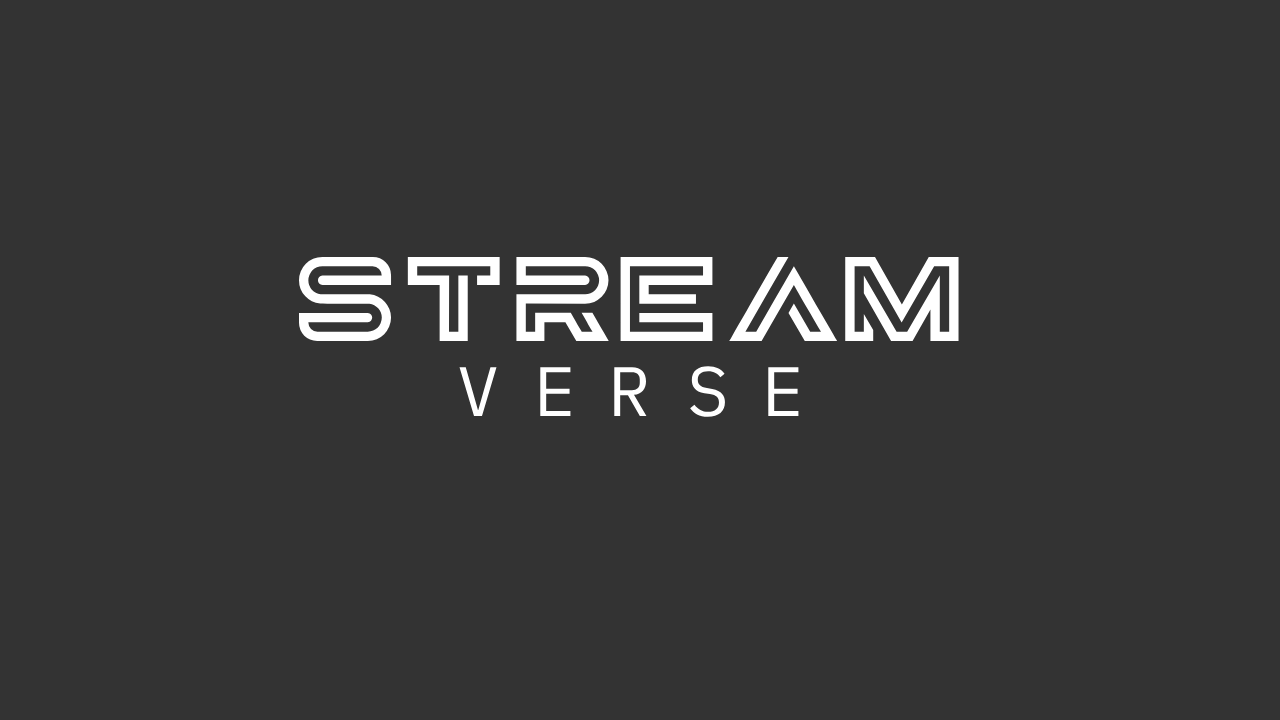
<style>
.page{position:relative;width:1280px;height:720px;background:#333333}
.page>*{position:absolute;margin:0}
.t1{font:120px "Garde";color:#ffffff}
.t2{font:70px "iAWriterDuospace-Regular";color:#ffffff}
</style>
<div class="page">
<p class="t1" style="left:299px;top:256px;width:660px;height:85px">STREAM</p>
<p class="t2" style="left:690px;top:366px;width:35px;height:51px">S</p>
<p class="t2" style="left:459px;top:367px;width:38px;height:49px">V</p>
<p class="t2" style="left:540px;top:367px;width:31px;height:49px">E</p>
<p class="t2" style="left:614px;top:367px;width:33px;height:49px">R</p>
<p class="t2" style="left:768px;top:367px;width:31px;height:49px">E</p>
</div>
